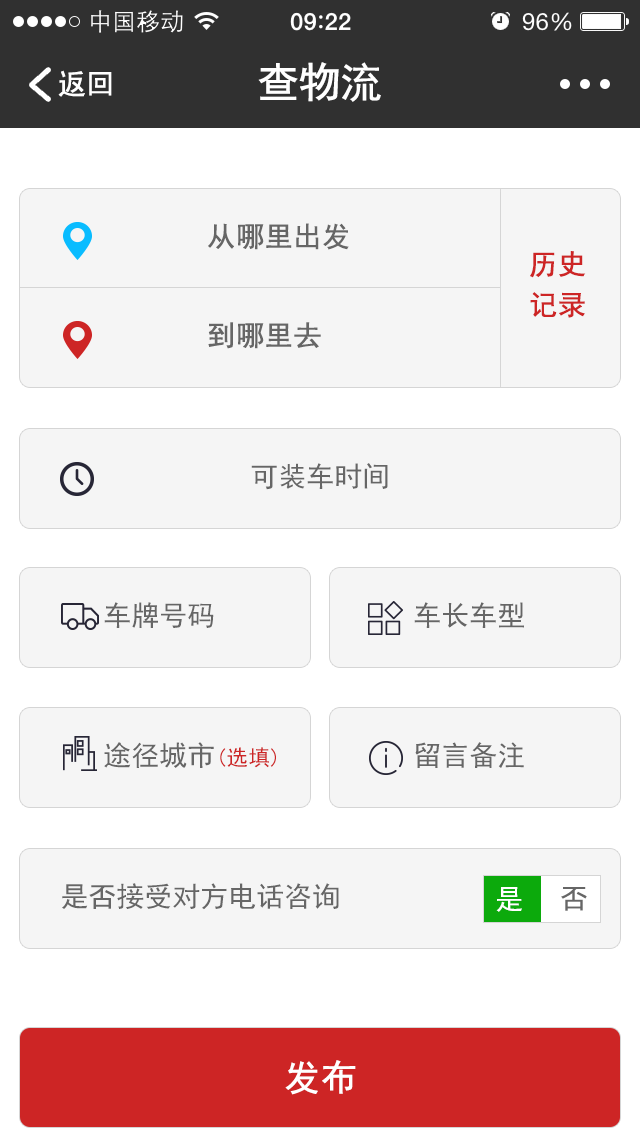
<style>
.page{position:relative;width:640px;height:1136px;background:#f5f5f5}
.page>*{position:absolute;margin:0}
.t1{font:42px "SimHei";letter-spacing:-0.04em;color:#ffffff;font-weight:bold}
.t2{font:28px "SimHei";color:#ffffff;font-weight:bold}
.t3{font:28px "SimHei";color:#666666;font-weight:bold}
.t4{font:28px/40.3px "SimHei";color:#cd2525;font-weight:bold}
.t5{font:28px "SimHei";color:#666666}
.t6{font:22px "SimHei";color:#cd2525}
.t7{font:28px "SimHei";color:#ffffff}
.t8{font:36px "SimHei";color:#ffffff;font-weight:bold}
</style>
<div class="page">
<p class="t1" style="left:258px;top:62px;width:123px;height:40px">查物流</p>
<p class="t2" style="left:58px;top:70px;width:54px;height:27px">返回</p>
<p class="t3" style="left:208px;top:223px;width:141px;height:27px">从哪里出发</p>
<p class="t4" style="left:530px;top:251px;width:56px;height:67px">历史<br>记录</p>
<p class="t3" style="left:208px;top:322px;width:113px;height:27px">到哪里去</p>
<p class="t5" style="left:251px;top:463px;width:137px;height:27px">可装车时间</p>
<p class="t5" style="left:104px;top:602px;width:110px;height:26px">车牌号码</p>
<p class="t5" style="left:414px;top:602px;width:110px;height:26px">车长车型</p>
<p class="t5" style="left:104px;top:742px;width:172px;height:26px">途径城市<span class="t6">(选填)</span></p>
<p class="t5" style="left:415px;top:742px;width:109px;height:26px">留言备注</p>
<p class="t5" style="left:62px;top:883px;width:277px;height:27px">是否接受对方电话咨询</p>
<p class="t7" style="left:496px;top:887px;width:26px;height:25px">是</p>
<p class="t5" style="left:561px;top:887px;width:26px;height:24px">否</p>
<p class="t8" style="left:285px;top:1060px;width:71px;height:35px">发布</p>
</div>
